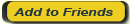
<style>
.page{position:relative;width:130px;height:24px;background:#eece20}
.page>*{position:absolute;margin:0}
.t1{font:11.2px "Arial-BoldItalicMT";color:#233645;scale:1.25 1}
</style>
<div class="page">
<p class="t1" style="left:14px;top:8px;width:99px;height:8px">Add to Friends</p>
</div>
